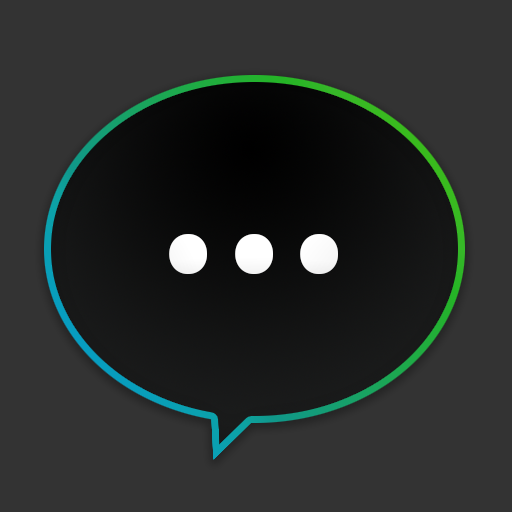
<style>
.page{position:relative;width:512px;height:512px;background:#333333}
.page>*{position:absolute;margin:0}
.t1{font:317px "MyriadPro-Regular";color:#ffffff}
</style>
<div class="page">
<p class="t1" style="left:169px;top:234px;width:169px;height:41px">...</p>
</div>
